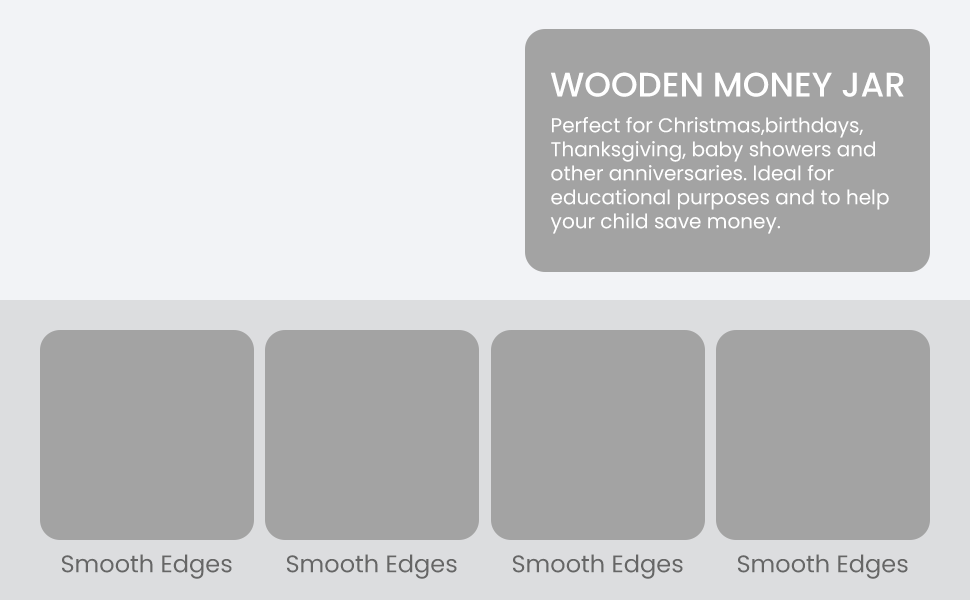
<style>
.page{position:relative;width:970px;height:600px;background:#a3a3a3}
.page>*{position:absolute;margin:0}
.t1{font:34px "Poppins-Medium";color:#ffffff;text-transform:uppercase}
.t2{font:20px "Poppins-Regular";color:#ffffff}
.t3{font:24px "Poppins-Regular";color:#666666}
</style>
<div class="page">
<p class="t1" style="left:551px;top:72px;width:353px;height:25px">Wooden Money Jar</p>
<p class="t2" style="left:550px;top:117px;width:339px;height:117px">Perfect for Christmas,birthdays,<br>Thanksgiving, baby showers and<br>other anniversaries. ldeal for<br>educational purposes and to help<br>your child save money.</p>
<p class="t3" style="left:61px;top:554px;width:171px;height:25px">Smooth Edges</p>
<p class="t3" style="left:286px;top:554px;width:171px;height:25px">Smooth Edges</p>
<p class="t3" style="left:512px;top:554px;width:171px;height:25px">Smooth Edges</p>
<p class="t3" style="left:737px;top:554px;width:171px;height:25px">Smooth Edges</p>
</div>
